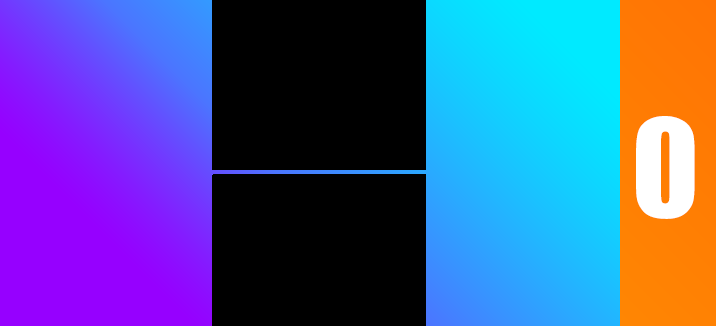
<style>
.page{position:relative;width:716px;height:326px;background:#000000}
.page>*{position:absolute;margin:0}
.t1{font:125px "Impact";color:#ffffff}
</style>
<div class="page">
<p class="t1" style="left:636px;top:116px;width:59px;height:103px">0</p>
</div>
